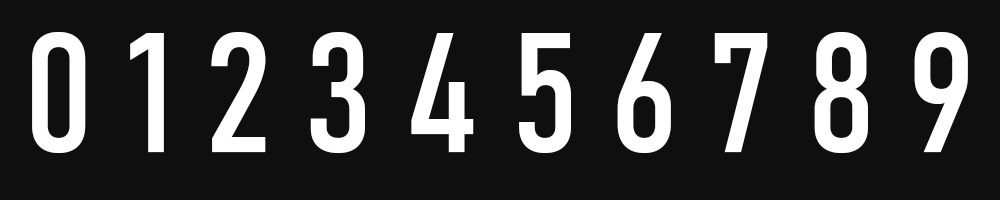
<style>
.page{position:relative;width:1000px;height:200px;background:#0f0f0f}
.page>*{position:absolute;margin:0}
.t1{font:166.6px "Bahnschrift-Condensed";color:#ffffff}
</style>
<div class="page">
<p class="t1" style="left:32px;top:32px;width:936px;height:121px">0 1 2 3 4 5 6 7 8 9</p>
</div>
